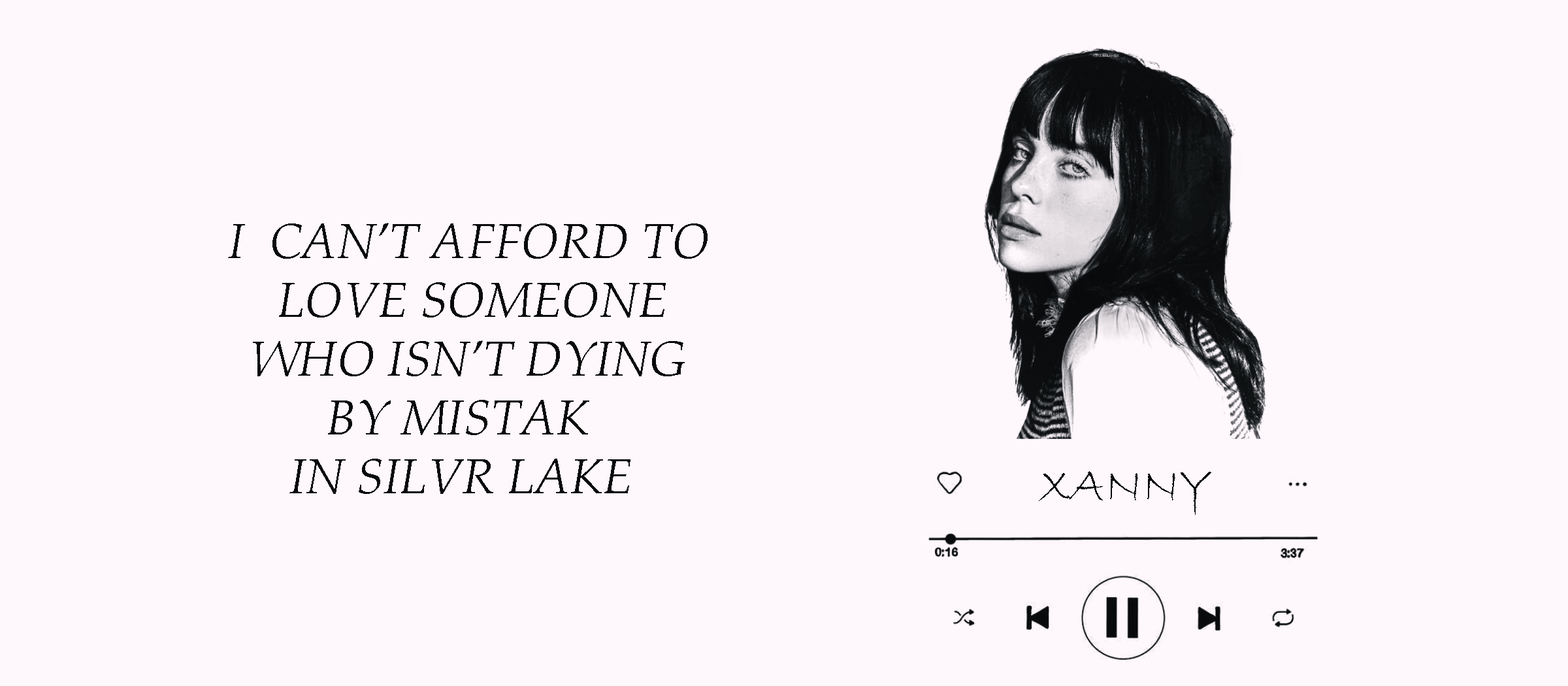
<style>
.page{position:relative;width:1568px;height:686px;background:#fef7fb}
.page>*{position:absolute;margin:0}
.t1{font:49px "BookAntiqua-Italic";color:#08090a;text-transform:uppercase}
.t2{font:49px "BradleyHandITC";color:#08090a;text-transform:uppercase}
</style>
<div class="page">
<p class="t1" style="left:228px;top:223px;width:480px;height:271px">i  can’t afford to <br>    love someone <br>  who isn’t dying <br>        by mistak <br>     in silvr lake</p>
<p class="t2" style="left:1039px;top:471px;width:172px;height:44px">xanny</p>
</div>
